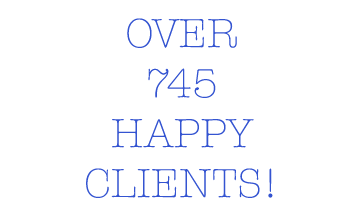
<style>
.page{position:relative;width:360px;height:220px;background:#ffffff}
.page>*{position:absolute;margin:0}
.t1{font:41.7px "AmericanTypewriter-Light";color:#3454d1}
</style>
<div class="page">
<p class="t1" style="left:86px;top:18px;width:187px;height:180px;text-align:center">OVER<br>745<br>HAPPY<br>CLIENTS!</p>
</div>
